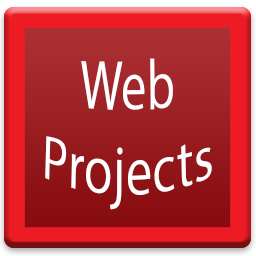
<style>
.page{position:relative;width:256px;height:256px}
.page>*{position:absolute;margin:0}
.t1{font:12px "MyriadPro-Regular";color:#ffffff}
</style>
<div class="page">
<p class="t1" style="left:45px;top:58px;width:167px;height:152px;text-align:center">Web<br>Projects</p>
</div>
